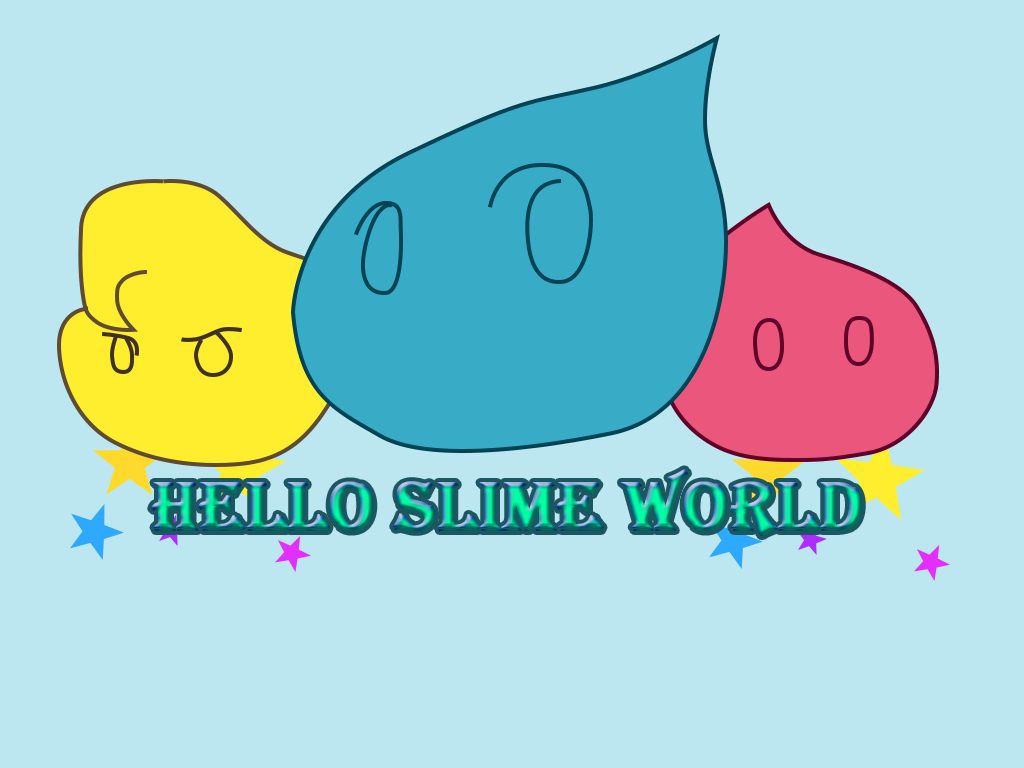
<style>
.page{position:relative;width:1024px;height:768px;background:#bce7f0}
.page>*{position:absolute;margin:0}
.t1{font:72px "Algerian";font-weight:bold}
</style>
<div class="page">
<p class="t1" style="left:151px;top:469px;width:711px;height:67px">Hello Slime World</p>
</div>
